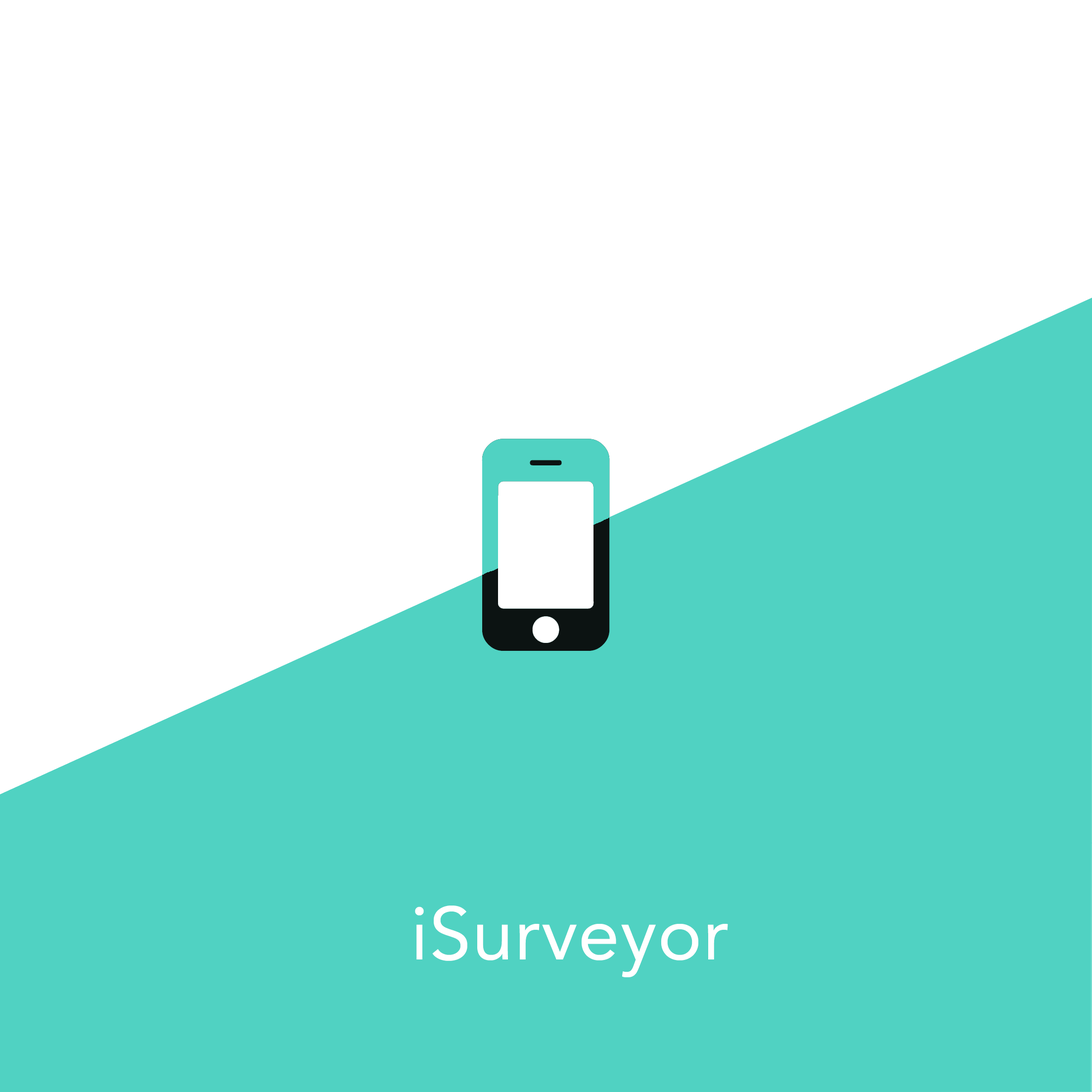
<style>
.page{position:relative;width:1092px;height:1092px;background:#ffffff}
.page>*{position:absolute;margin:0}
.t1{font:74.2px "Avenir-Roman";letter-spacing:0.015em;color:#ffffff}
</style>
<div class="page">
<p class="t1" style="left:415px;top:906px;width:313px;height:71px">iSurveyor</p>
</div>
